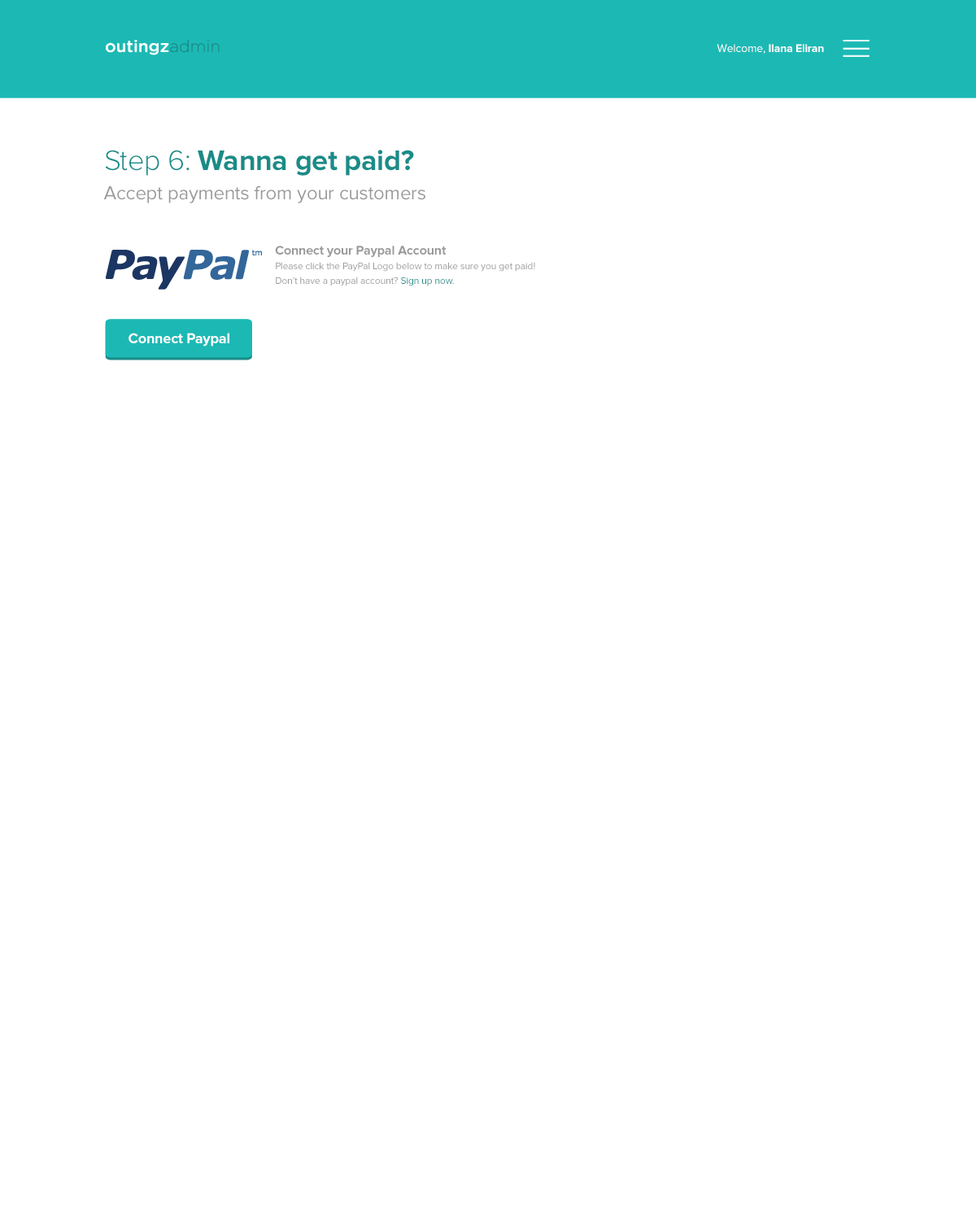
<style>
.page{position:relative;width:976px;height:1221px;background:#ffffff}
.page>*{position:absolute;margin:0}
.t1{font:11.4px "ProximaNova-Bold";letter-spacing:-0.01em;color:#ffffff}
.t2{font:11.4px "ProximaNova-Regular";letter-spacing:-0.01em;color:#ffffff}
.t3{font:19.5px/29.3px "ProximaNova-Regular";letter-spacing:-0.01em;color:#999999}
.t4{font:29.3px "ProximaNova-Light";letter-spacing:-0.01em;color:#198c88}
.t5{font:29.3px "ProximaNova-Bold";letter-spacing:-0.01em;color:#198c88}
.t6{font:9.8px/11.4px "ProximaNova-Regular";letter-spacing:-0.01em;color:#999999}
.t7{font:13px "ProximaNova-Bold";letter-spacing:-0.01em;color:#999999}
.t8{font:9.8px/11.4px "ProximaNova-Regular";letter-spacing:-0.01em;color:#198c88}
.t9{font:14.6px "ProximaNova-Bold";letter-spacing:-0.01em;color:#ffffff}
</style>
<div class="page">
<p class="t1" style="left:717px;top:44px;width:107px;height:10px"><span class="t2">Welcome, </span>Ilana Eliran</p>
<p class="t3" style="left:103px;top:150px;width:323px;height:53px"><span class="t4">Step 6:</span><span class="t5"> Wanna get paid?<br></span>Accept payments from your customers</p>
<p class="t6" style="left:275px;top:246px;width:260px;height:40px"><span class="t7">Connect your Paypal Account<br></span>Please click the PayPal Logo below to make sure you get paid! <br>Don’t have a paypal account? <span class="t8">Sign up now.</span></p>
<p class="t9" style="left:129px;top:333px;width:100px;height:14px">Connect Paypal</p>
</div>
